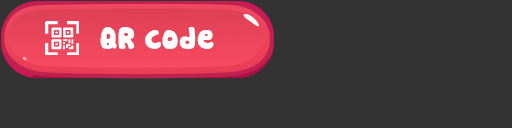
<style>
.page{position:relative;width:512px;height:128px;background:#333333}
.page>*{position:absolute;margin:0}
.t1{font:30px "Cookies";color:#ffffff}
</style>
<div class="page">
<p class="t1" style="left:100px;top:27px;width:114px;height:22px">QR code</p>
</div>
